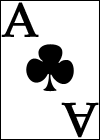
<style>
.page{position:relative;width:100px;height:140px;background:#ffffff}
.page>*{position:absolute;margin:0}
.t1{font:48px "PalatinoLinotype-Roman";color:#000000;font-weight:bold}
</style>
<div class="page">
<p class="t1" style="left:1px;top:2px;width:38px;height:35px">A</p>
<p class="t1" style="left:61px;top:102px;width:38px;height:36px;rotate:180deg">A</p>
</div>
